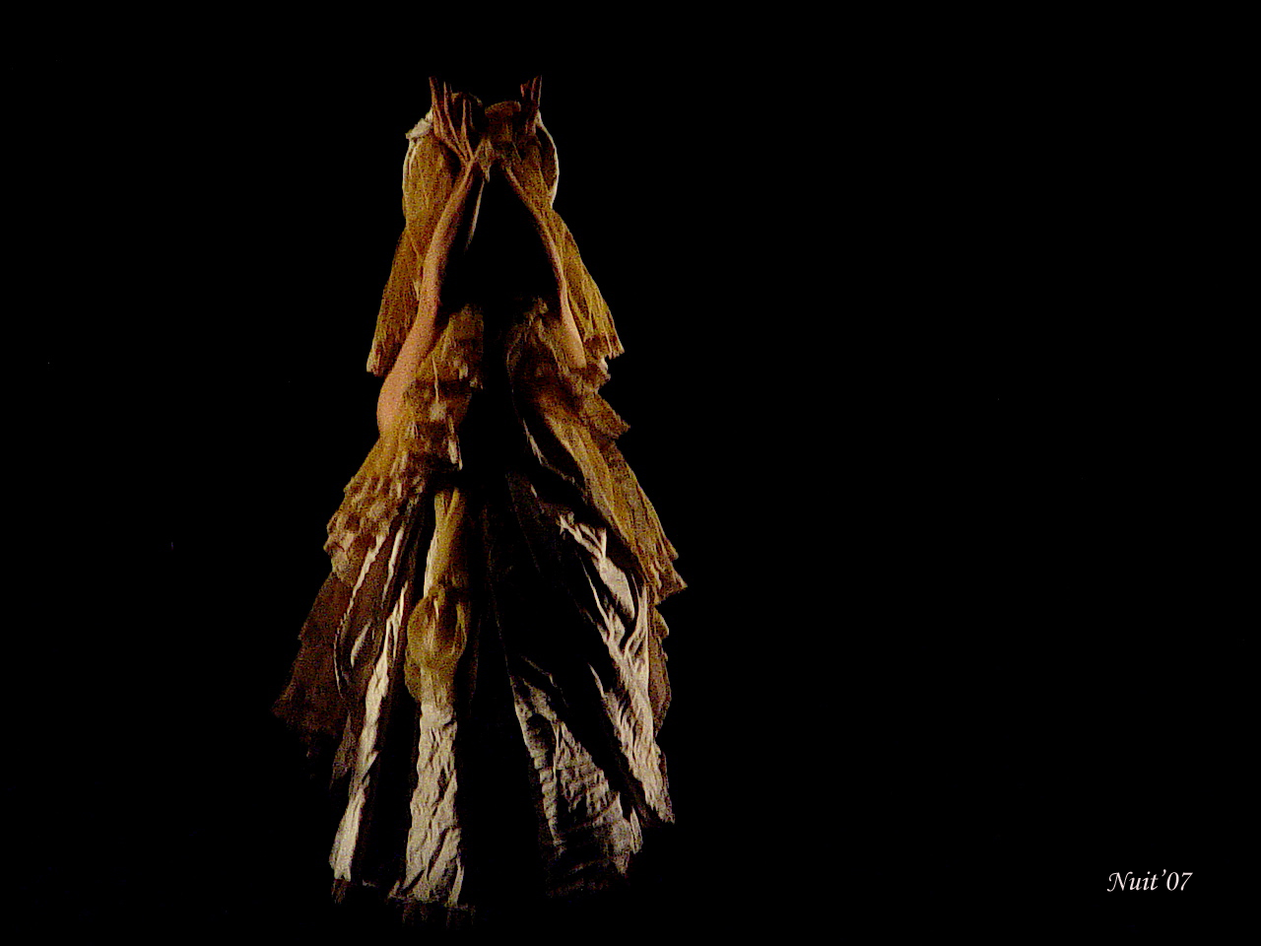
<style>
.page{position:relative;width:1261px;height:946px;background:#000000}
.page>*{position:absolute;margin:0}
.t1{font:29.6px "MonotypeCorsiva";color:#efdfdf}
</style>
<div class="page">
<p class="t1" style="left:1106px;top:869px;width:87px;height:23px">Nuit’07</p>
</div>
